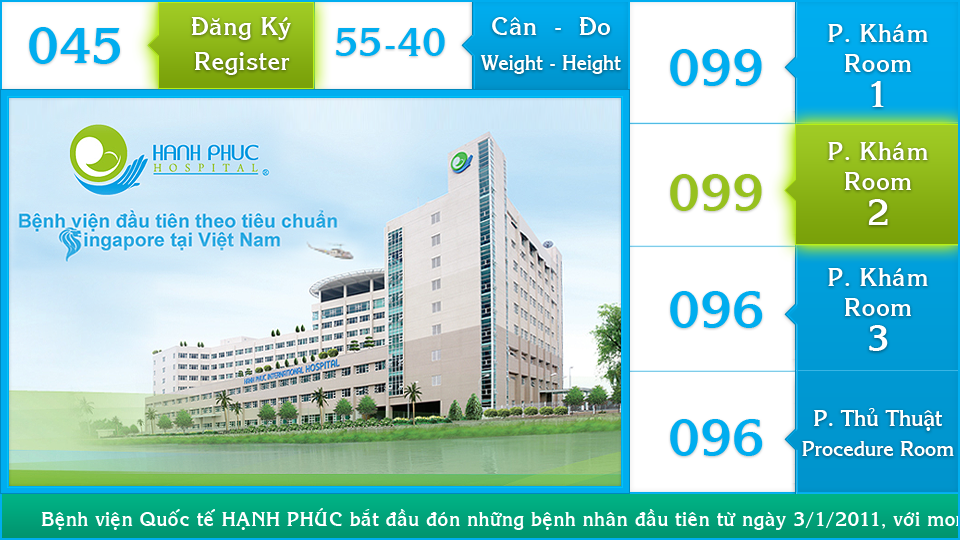
<style>
.page{position:relative;width:960px;height:540px}
.page>*{position:absolute;margin:0}
.t1{font:24px/35px "VNI-Korin-Bold";letter-spacing:0.005em;color:#ffffff}
.t2{font:20px/35px "VNI-Korin-Bold";letter-spacing:-0.03em;color:#ffffff}
.t3{font:24px/35px "VNI-Korin-Bold";color:#ffffff}
.t4{font:50px "VNI-Korin-Bold";letter-spacing:0.005em;color:#00adef}
.t5{font:38px "VNI-Korin-Bold";letter-spacing:0.005em;color:#00adef}
.t6{font:24px/30px "VNI-Korin-Bold";letter-spacing:0.005em;color:#ffffff}
.t7{font:35px/35px "VNI-Korin-Bold";letter-spacing:0.005em;color:#ffffff}
.t8{font:50px "VNI-Korin-Bold";letter-spacing:0.005em;color:#97c11f}
.t9{font:22px/35px "VNI-Korin-Bold";letter-spacing:-0.03em;color:#ffffff}
.t10{font:20px/30px "VNI-Korin-Bold";letter-spacing:-0.03em;color:#ffffff}
</style>
<div class="page">
<p class="t1" style="left:191px;top:17px;width:100px;height:58px;text-align:center">Ñaêng Kyù<br>Register</p>
<p class="t2" style="left:480px;top:16px;width:141px;height:58px;text-align:center"><span class="t3">Caân  -  Ño<br></span>Weight - Height</p>
<p class="t4" style="left:29px;top:27px;width:91px;height:37px">045</p>
<p class="t5" style="left:336px;top:28px;width:109px;height:28px">55-40</p>
<p class="t1" style="left:828px;top:24px;width:100px;height:83px;text-align:center">P. Khaùm<br><span class="t6">Room<br></span><span class="t7">1</span></p>
<p class="t4" style="left:670px;top:49px;width:92px;height:37px">099</p>
<p class="t1" style="left:828px;top:142px;width:100px;height:83px;text-align:center">P. Khaùm<br><span class="t6">Room<br></span><span class="t7">2</span></p>
<p class="t8" style="left:670px;top:174px;width:92px;height:37px">099</p>
<p class="t1" style="left:828px;top:268px;width:100px;height:83px;text-align:center">P. Khaùm<br><span class="t6">Room<br></span><span class="t7">3</span></p>
<p class="t4" style="left:670px;top:291px;width:93px;height:37px">096</p>
<p class="t9" style="left:802px;top:408px;width:152px;height:48px;text-align:center">P. Thuû Thuaät<br><span class="t10">Procedure Room</span></p>
<p class="t4" style="left:670px;top:419px;width:93px;height:37px">096</p>
</div>
